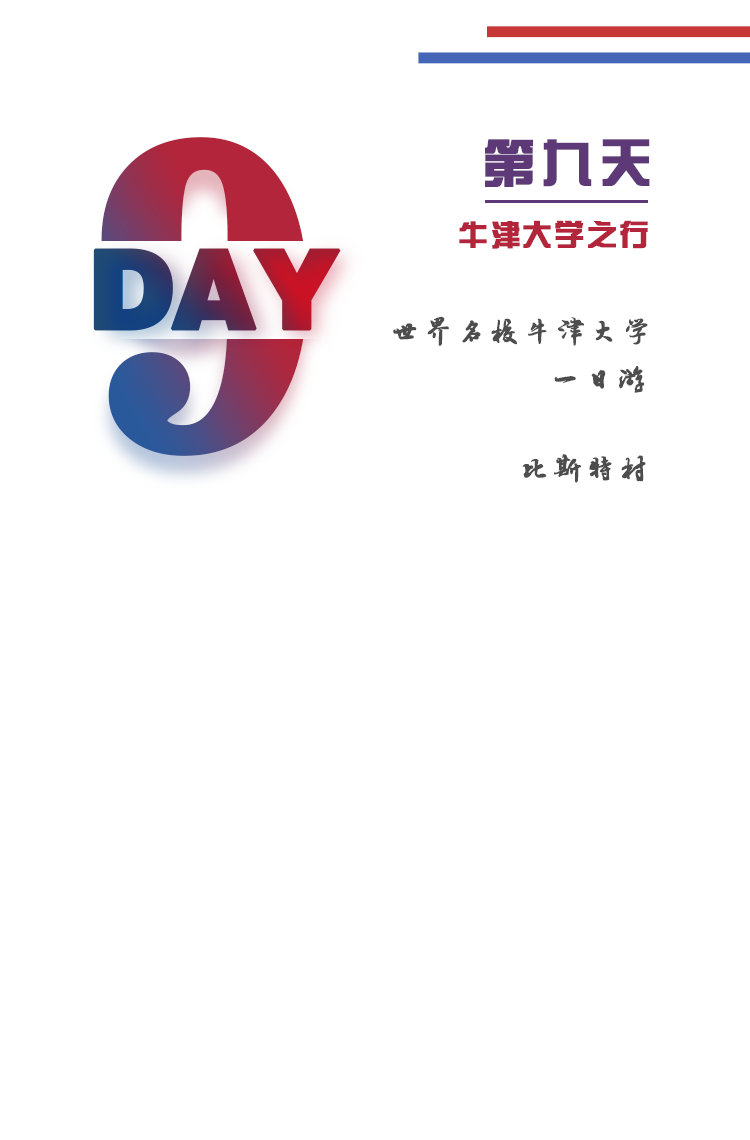
<style>
.page{position:relative;width:750px;height:1140px;background:#ffffff}
.page>*{position:absolute;margin:0}
.t1{font:432.9px "News706BT-BoldC";letter-spacing:-0.05em;font-weight:bold}
.t2{font:52px "FZZYJW--GB1-0";letter-spacing:0.1em;color:#5d3a77;font-weight:bold}
.t3{font:30px "FZZYJW--GB1-0";letter-spacing:0.05em;color:#b3253a;font-weight:bold}
.t4{font:110px "FZCCHJW--GB1-0";letter-spacing:-0.05em;font-weight:bold}
.t5{font:30px/48px "·½ÕýÂÀ½¨µÂ×ÖÌå";letter-spacing:0.075em;color:#4d4d4d;font-weight:bold}
.t6{font:30px "·½ÕýÂÀ½¨µÂ×ÖÌå";letter-spacing:0.075em;color:#4d4d4d;font-weight:bold}
</style>
<div class="page">
<p class="t1" style="left:101px;top:137px;width:207px;height:319px">9</p>
<p class="t2" style="left:485px;top:139px;width:165px;height:48px">第九天</p>
<p class="t3" style="left:459px;top:220px;width:189px;height:29px">牛津大学之行</p>
<p class="t4" style="left:93px;top:248px;width:248px;height:83px">DAY</p>
<p class="t5" style="left:393px;top:316px;width:255px;height:77px">世界名校牛津大学<br>     一日游</p>
<p class="t6" style="left:522px;top:454px;width:124px;height:29px">比斯特村</p>
</div>
